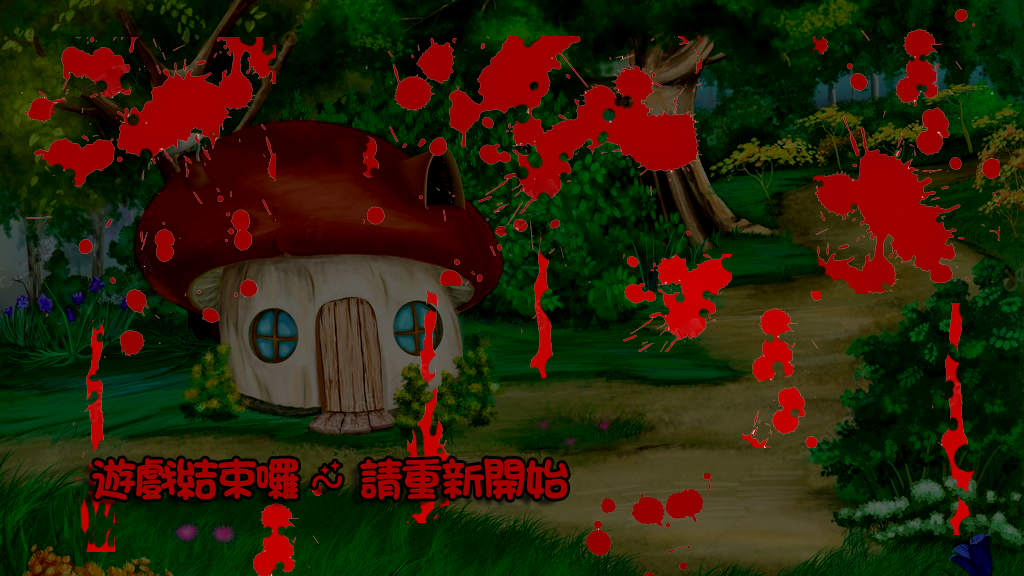
<style>
.page{position:relative;width:1024px;height:576px}
.page>*{position:absolute;margin:0}
.t1{font:45px "-by-";color:#a10000}
</style>
<div class="page">
<p class="t1" style="left:92px;top:458px;width:476px;height:42px">遊戲結束囉~ 請重新開始</p>
</div>
